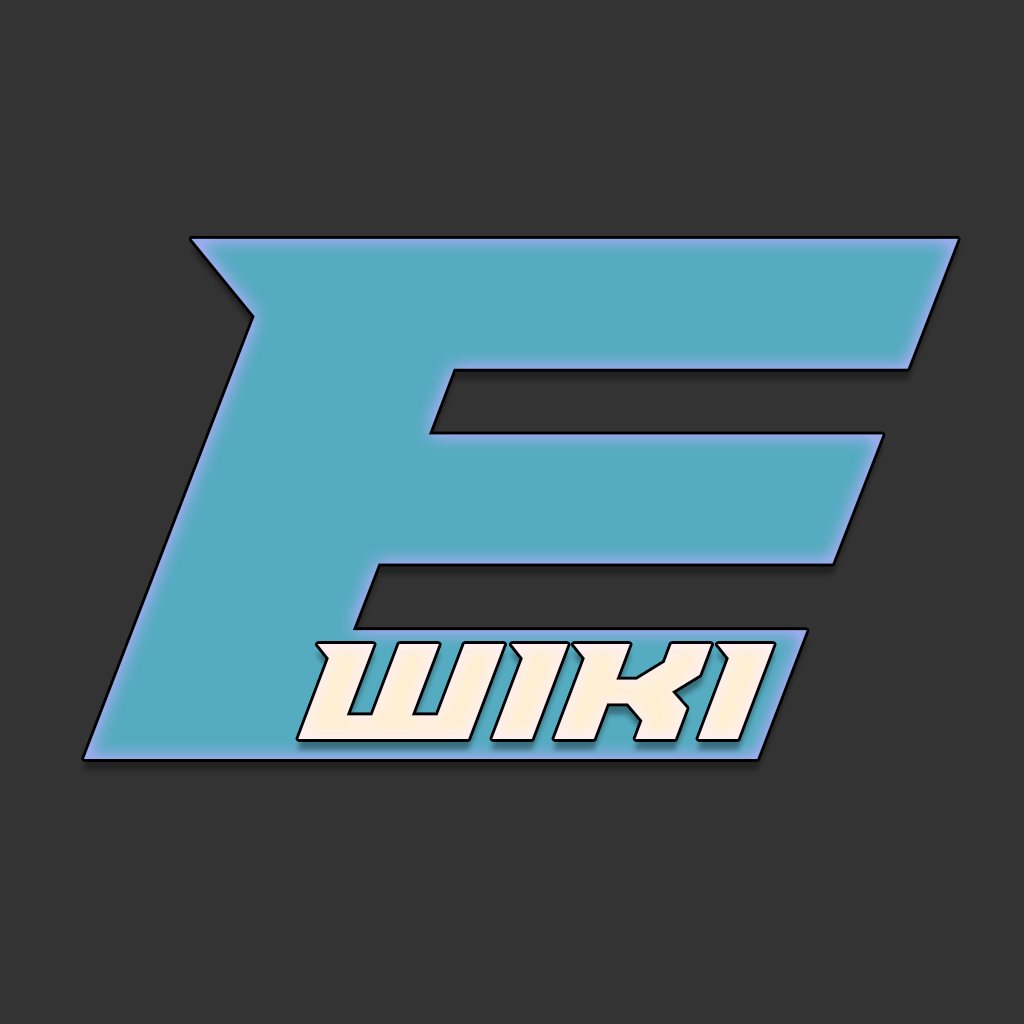
<style>
.page{position:relative;width:1024px;height:1024px;background:#333333}
.page>*{position:absolute;margin:0}
.t1{font:805.3px "Paladins";color:#55abc0}
.t2{font:146.5px "Paladins";color:#ffefd2}
</style>
<div class="page">
<p class="t1" style="left:84px;top:238px;width:874px;height:521px">E</p>
<p class="t2" style="left:298px;top:644px;width:476px;height:95px">Wiki</p>
</div>
